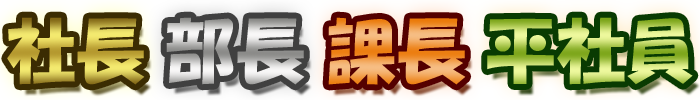
<style>
.page{position:relative;width:700px;height:100px}
.page>*{position:absolute;margin:0}
.t1{font:69.7px "HGSoeiKakupoptai"}
</style>
<div class="page">
<p class="t1" style="left:7px;top:17px;width:138px;height:68px">社長</p>
<p class="t1" style="left:166px;top:17px;width:139px;height:68px">部長</p>
<p class="t1" style="left:328px;top:17px;width:138px;height:68px">課長</p>
<p class="t1" style="left:487px;top:17px;width:206px;height:68px">平社員</p>
</div>
